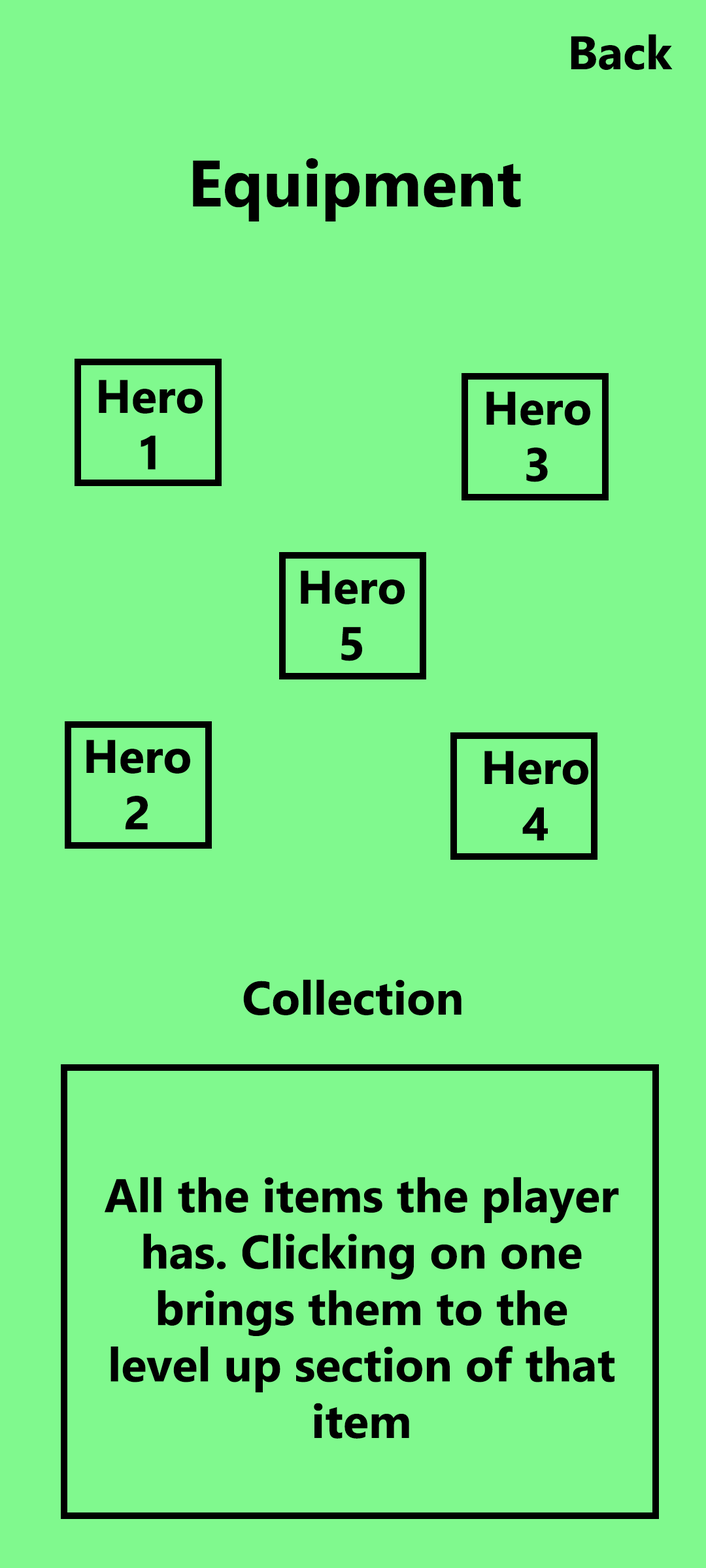
<style>
.page{position:relative;width:706px;height:1568px;background:#80f98e}
.page>*{position:absolute;margin:0}
.t1{font:47px "Ebrima-Bold";color:#000000}
.t2{font:65.3px "Ebrima-Bold";color:#000000}
</style>
<div class="page">
<p class="t1" style="left:570px;top:34px;width:102px;height:36px">Back</p>
<p class="t2" style="left:193px;top:158px;width:328px;height:63px">Equipment</p>
<p class="t1" style="left:99px;top:380px;width:104px;height:90px;text-align:center">Hero<br>1</p>
<p class="t1" style="left:486px;top:391px;width:104px;height:91px;text-align:center">Hero<br>3</p>
<p class="t1" style="left:301px;top:570px;width:103px;height:91px;text-align:center">Hero<br>5</p>
<p class="t1" style="left:86px;top:740px;width:104px;height:90px;text-align:center">Hero<br>2</p>
<p class="t1" style="left:484px;top:751px;width:104px;height:90px;text-align:center">Hero<br>4</p>
<p class="t1" style="left:243px;top:979px;width:218px;height:36px">Collection</p>
<p class="t1" style="left:105px;top:1177px;width:514px;height:262px;text-align:center">All the items the player has. Clicking on one brings them to the level up section of that item</p>
</div>
